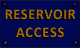
<style>
.page{position:relative;width:80px;height:48px;background:#000852}
.page>*{position:absolute;margin:0}
.t1{font:14.7px/17.3px "Calibri-Bold";letter-spacing:0.04em;color:#a36800;text-transform:uppercase}
.t2{font:14.7px/17.3px "Calibri-Bold";letter-spacing:0.06em;color:#a36800;text-transform:uppercase}
</style>
<div class="page">
<p class="t1" style="left:5px;top:9px;width:71px;height:29px;text-align:center">RESERVOIR<br> <span class="t2">ACCESS</span></p>
</div>
